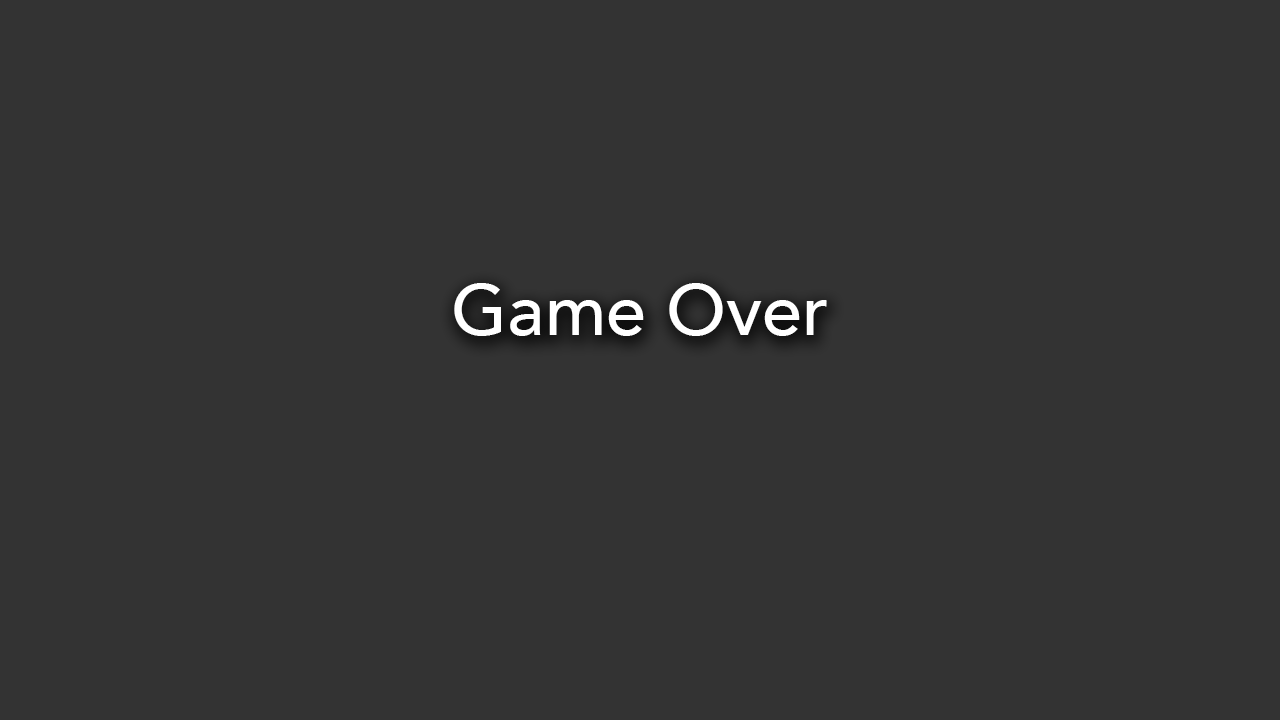
<style>
.page{position:relative;width:1280px;height:720px;background:#333333}
.page>*{position:absolute;margin:0}
.t1{font:72px "Avenir-Medium";color:#ffffff}
</style>
<div class="page">
<p class="t1" style="left:454px;top:283px;width:373px;height:53px">Game Over</p>
</div>
